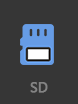
<style>
.page{position:relative;width:78px;height:104px;background:#363636}
.page>*{position:absolute;margin:0}
.t1{font:14px "SegoeUI";color:#848484;font-weight:bold}
</style>
<div class="page">
<p class="t1" style="left:30px;top:82px;width:18px;height:11px">SD</p>
</div>
